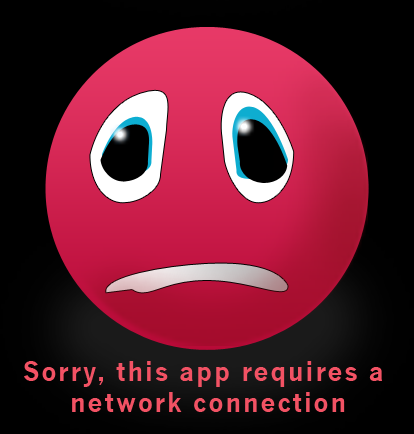
<style>
.page{position:relative;width:414px;height:434px;background:#000000}
.page>*{position:absolute;margin:0}
.t1{font:26px "NewsGothic-Bold";letter-spacing:0.075em;color:#f25264}
</style>
<div class="page">
<p class="t1" style="left:24px;top:361px;width:358px;height:51px;text-align:center">Sorry, this app requires a <br>network connection</p>
</div>
